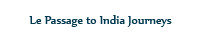
<style>
.page{position:relative;width:200px;height:40px;background:#ffffff}
.page>*{position:absolute;margin:0}
.t1{font:14px "Nyala-Regular";color:#00384f}
</style>
<div class="page">
<p class="t1" style="left:29px;top:15px;width:143px;height:12px">Le Passage to India Journeys</p>
</div>
